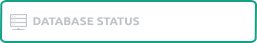
<style>
.page{position:relative;width:257px;height:43px;background:#ffffff}
.page>*{position:absolute;margin:0}
.t1{font:11px "Ubuntu-Bold";color:#bec3c7;scale:1.07 1}
</style>
<div class="page">
<p class="t1" style="left:33px;top:17px;width:107px;height:9px">DATABASE STATUS</p>
</div>
